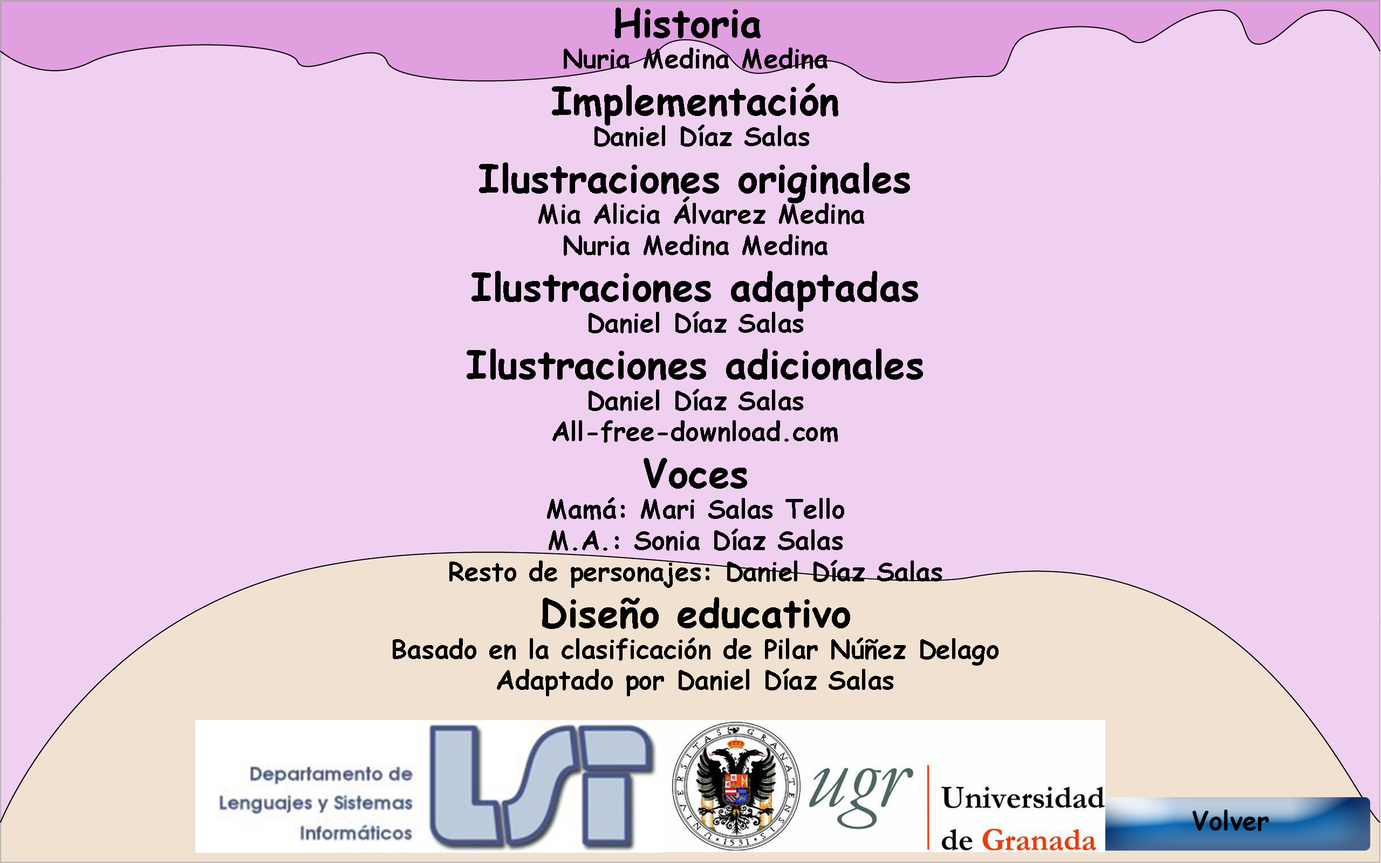
<style>
.page{position:relative;width:1381px;height:863px;background:#efd0f0}
.page>*{position:absolute;margin:0}
.t1{font:25.9px "ComicSansMS-Bold";color:#000000}
.t2{font:38.8px "ComicSansMS-Bold";color:#000000}
</style>
<div class="page">
<p class="t1" style="left:393px;top:8px;width:606px;height:689px;text-align:center"><span class="t2">Historia <br></span>Nuria Medina Medina<br><span class="t2">Implementación<br></span> Daniel Díaz Salas<br><span class="t2">Ilustraciones originales<br></span> Mia Alicia Álvarez Medina<br>Nuria Medina Medina<br><span class="t2">Ilustraciones adaptadas<br></span>Daniel Díaz Salas<br><span class="t2">Ilustraciones adicionales<br></span>Daniel Díaz Salas<br>All-free-download.com<br><span class="t2">Voces<br></span>Mamá: Mari Salas Tello<br>M.A.: Sonia Díaz Salas<br>Resto de personajes: Daniel Díaz Salas<br><span class="t2">Diseño educativo<br></span>Basado en la clasificación de Pilar Núñez Delago<br>Adaptado por Daniel Díaz Salas</p>
<p class="t1" style="left:1192px;top:810px;width:78px;height:21px">Volver</p>
</div>
